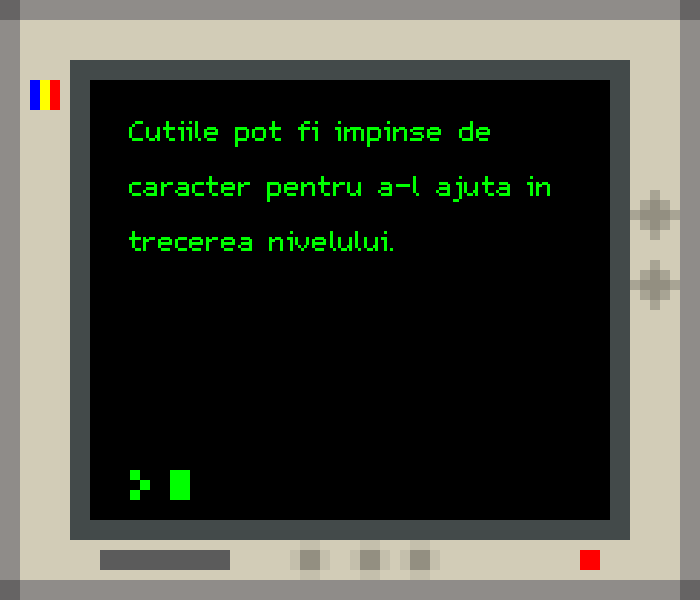
<style>
.page{position:relative;width:700px;height:600px;background:#000000}
.page>*{position:absolute;margin:0}
.t1{font:46.3px "m5x7";color:#00ff00}
</style>
<div class="page">
<p class="t1" style="left:129px;top:121px;width:421px;height:130px">Cutiile pot fi impinse de caracter pentru a-l ajuta in trecerea nivelului.</p>
</div>
